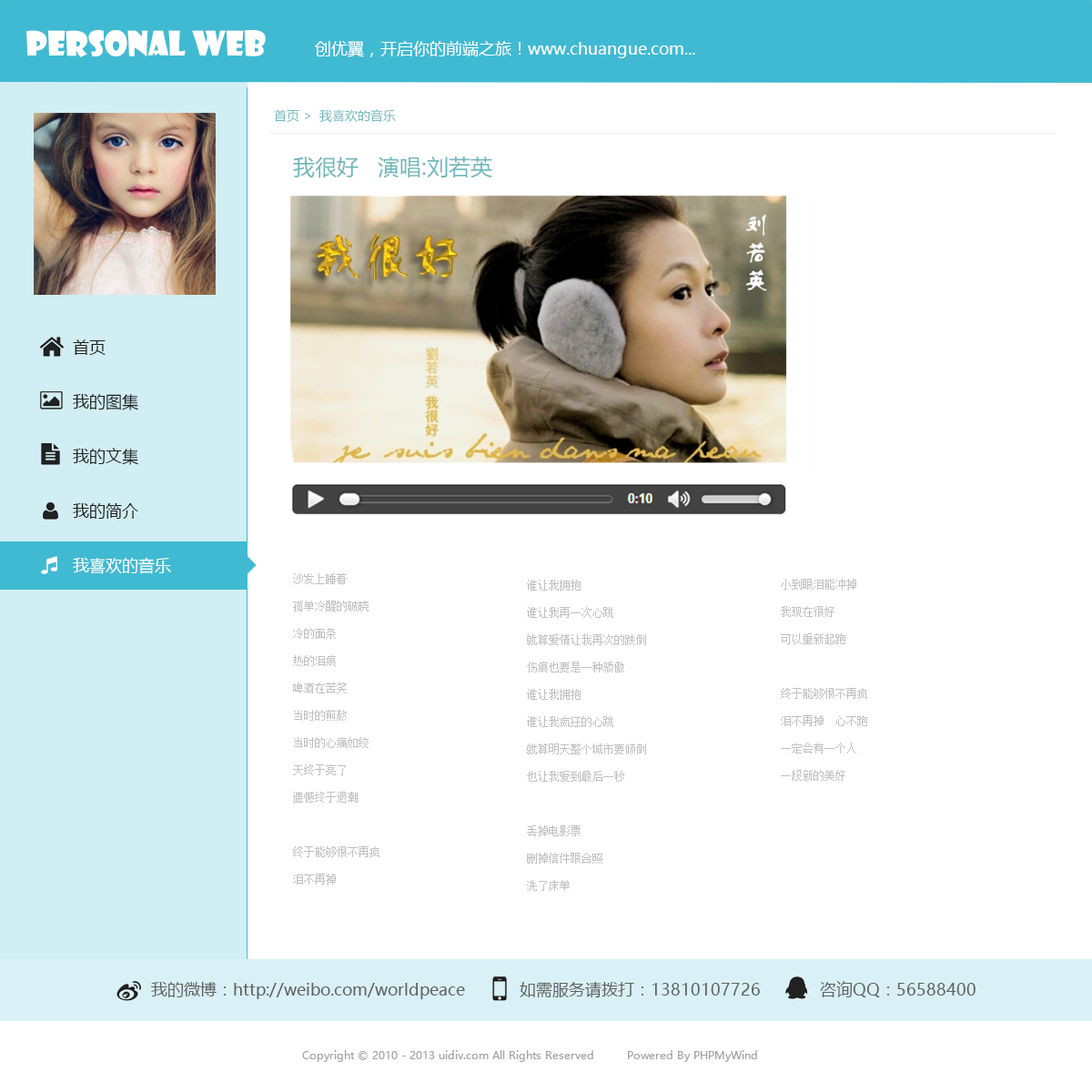
<style>
.page{position:relative;width:1092px;height:1092px;background:#ffffff}
.page>*{position:absolute;margin:0}
.t1{font:32.8px "ShowcardGothic";color:#ffffff}
.t2{font:16.4px "MicrosoftYaHei";color:#ffffff}
.t3{font:12.7px "MicrosoftYaHei";color:#72b7bc}
.t4{font:21.8px "MicrosoftYaHei";color:#72b7bc}
.t5{font:16.4px/27.3px "MicrosoftYaHei";color:#1e1e1e}
.t6{font:16.4px/27.3px "MicrosoftYaHei";color:#232323}
.t7{font:16.4px/27.3px "MicrosoftYaHei";color:#ffffff}
.t8{font:10.9px/27.3px "SimSun";color:#bfbfbf}
.t9{font:16.4px "MicrosoftYaHei";color:#616161}
.t10{font:10.9px "MicrosoftYaHei";color:#a2a2a2}
</style>
<div class="page">
<p class="t1" style="left:26px;top:30px;width:240px;height:27px">personal web</p>
<p class="t2" style="left:315px;top:41px;width:380px;height:17px">创优翼，开启你的前端之旅！www.chuangue.com...</p>
<p class="t3" style="left:274px;top:109px;width:122px;height:13px">首页 &gt;  我喜欢的音乐</p>
<p class="t4" style="left:293px;top:157px;width:199px;height:21px">我很好   演唱:刘若英</p>
<p class="t5" style="left:73px;top:339px;width:98px;height:235px">首页<br><br>我的图集<br><br><span class="t6">我的文集<br></span><br>我的简介<br><br><span class="t7">我喜欢的音乐</span></p>
<p class="t8" style="left:293px;top:573px;width:86px;height:312px">沙发上睡着<br>孤单冷醒的破晓<br>冷的面条<br>热的泪痕<br>啤酒在苦笑<br>当时的煎熬<br>当时的心痛如绞<br>天终于亮了<br>遗憾终于退潮<br><br>终于能够恨不再疯<br>泪不再掉</p>
<p class="t8" style="left:527px;top:580px;width:119px;height:311px">谁让我拥抱<br>谁让我再一次心跳<br>就算爱情让我再次的跌倒<br>伤痕也要是一种骄傲<br>谁让我拥抱<br>谁让我疯狂的心跳<br>就算明天整个城市要倾倒<br>也让我爱到最后一秒<br><br>丢掉电影票<br>删掉信件跟合照<br>洗了床单</p>
<p class="t8" style="left:781px;top:579px;width:86px;height:202px">小到眼泪能冲掉<br>我现在很好<br>可以重新起跑<br><br>终于能够恨不再疯<br>泪不再掉　心不跑<br>一定会有一个人<br>一段新的美好</p>
<p class="t9" style="left:151px;top:981px;width:825px;height:18px">我的微博：http://weibo.com/worldpeace            如需服务请拨打：13810107726             咨询QQ：56588400</p>
<p class="t10" style="left:302px;top:1050px;width:455px;height:12px">Copyright © 2010 - 2013 uidiv.com All Rights Reserved         Powered By PHPMyWind</p>
</div>
